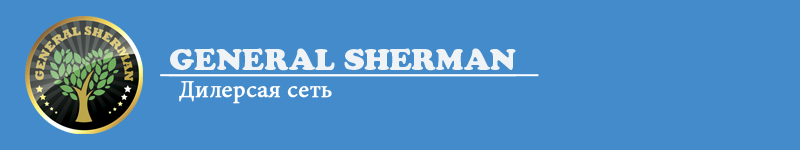
<style>
.page{position:relative;width:800px;height:150px;background:#438bca}
.page>*{position:absolute;margin:0}
.t1{font:30px "CooperBlackStd";color:#eff3f6;text-decoration:underline}
.t2{font:24px "MinionPro-Regular";color:#ffffff;font-weight:bold}
</style>
<div class="page">
<p class="t1" style="left:169px;top:48px;width:347px;height:29px">GENERAL SHERMAN</p>
<p class="t2" style="left:179px;top:81px;width:153px;height:23px">Дилерсая сеть</p>
</div>
